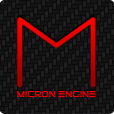
<style>
.page{position:relative;width:114px;height:114px;background:#0c0c0d}
.page>*{position:absolute;margin:0}
.t1{font:86.8px "Fh_Blue";scale:1.12 1}
.t2{font:8.1px "ElementalEnd"}
</style>
<div class="page">
<p class="t1" style="left:17px;top:17px;width:79px;height:70px">M</p>
<p class="t2" style="left:17px;top:89px;width:79px;height:8px">MICRON ENGINE</p>
<p class="t2" style="left:17px;top:90px;width:79px;height:8px">MICRON ENGINE</p>
</div>
